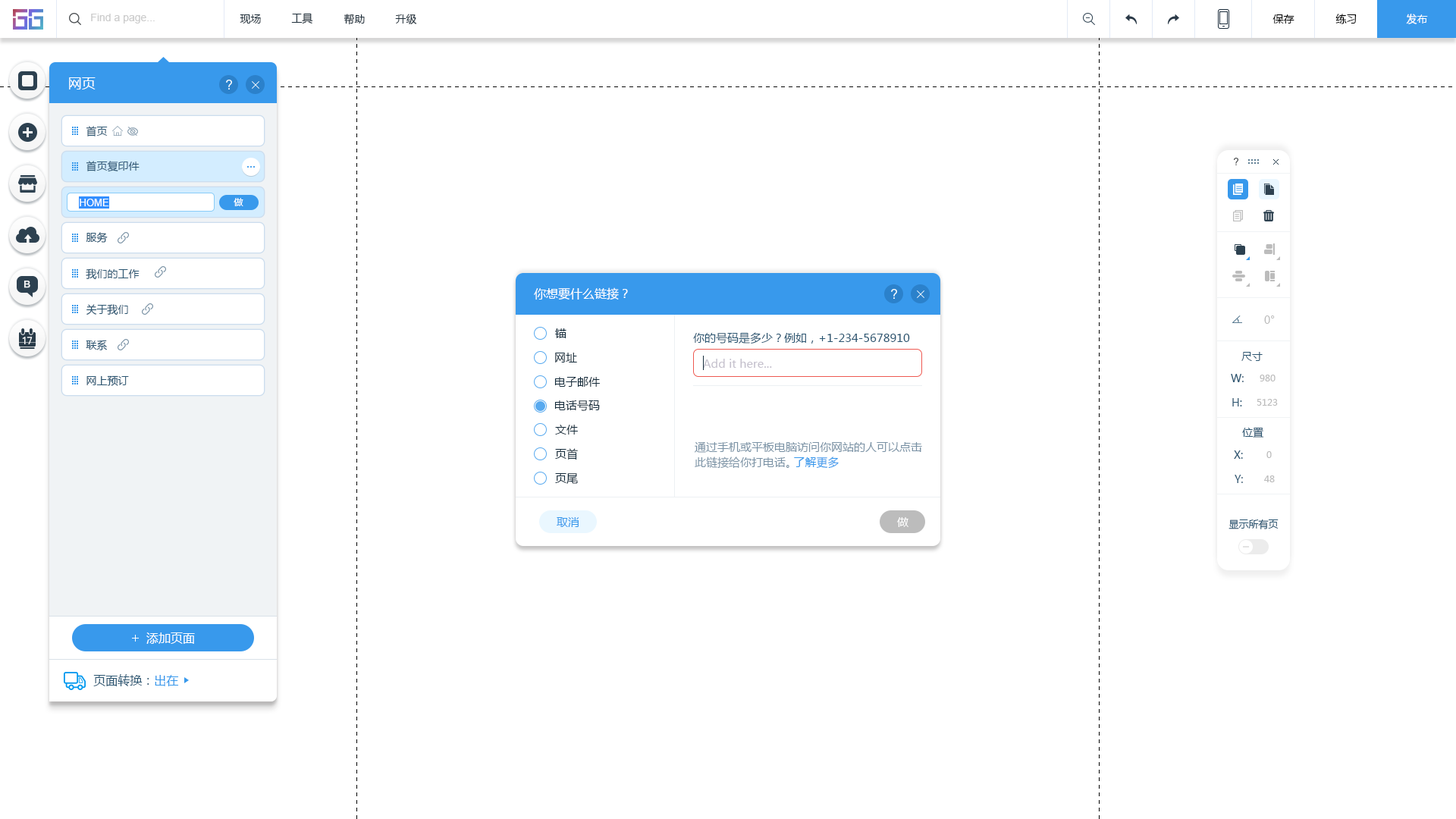
<style>
.page{position:relative;width:1456px;height:819px;background:#ffffff}
.page>*{position:absolute;margin:0}
.t1{font:10.6px "ArialMT";color:#cccccc}
.t2{font:10.6px "MicrosoftYaHei";color:#20303c}
.t3{font:10.6px "MicrosoftYaHei";color:#000000}
.t4{font:10.6px "MicrosoftYaHei";color:#ffffff}
.t5{font:13.6px "MicrosoftYaHei";color:#ffffff}
.t6{font:10.6px "MicrosoftYaHei";color:#2b5672}
.t7{font:9.1px "MicrosoftYaHei";color:#ffffff}
.t8{font:9.9px "ArialMT";color:#ffffff}
.t9{font:12.1px "MicrosoftYaHei";color:#ffffff}
.t10{font:10.6px "MicrosoftYaHei";color:#bcbcbc}
.t11{font:11.4px "MicrosoftYaHei";color:#162d3d}
.t12{font:11.4px "MicrosoftYaHei";color:#2b5672}
.t13{font:11.4px "MicrosoftYaHei";color:#c5c1cd}
.t14{font:9.1px "MicrosoftYaHei";color:#bcbcbc}
.t15{font:11.4px/15.2px "MicrosoftYaHei";color:#7a92a5}
.t16{font:11.4px/15.2px "MicrosoftYaHei";color:#3899ec}
.t17{font:11.4px "MicrosoftYaHei";color:#3899ec}
.t18{font:11.4px "MicrosoftYaHei";color:#ffffff}
.t19{font:9.9px "MicrosoftYaHei";color:#2b5672}
.t20{font:9.1px "MicrosoftYaHei";color:#2b5672}
.t21{font:9.1px "MicrosoftYaHei";color:#3899ec}
</style>
<div class="page">
<p class="t1" style="left:91px;top:14px;width:64px;height:10px">Find a page...</p>
<p class="t2" style="left:240px;top:14px;width:21px;height:10px">现场</p>
<p class="t2" style="left:291px;top:13px;width:22px;height:11px">工具</p>
<p class="t2" style="left:344px;top:14px;width:21px;height:11px">帮助</p>
<p class="t2" style="left:395px;top:14px;width:22px;height:10px">升级</p>
<p class="t3" style="left:1272px;top:14px;width:22px;height:10px">保存</p>
<p class="t3" style="left:1335px;top:14px;width:22px;height:10px">练习</p>
<p class="t4" style="left:1406px;top:14px;width:22px;height:10px">发布</p>
<p class="t5" style="left:69px;top:77px;width:27px;height:12px">网页</p>
<p class="t6" style="left:86px;top:126px;width:22px;height:10px">首页</p>
<p class="t6" style="left:86px;top:161px;width:54px;height:11px">首页复印件</p>
<p class="t7" style="left:234px;top:198px;width:9px;height:8px">做</p>
<p class="t8" style="left:80px;top:199px;width:29px;height:7px">HOME</p>
<p class="t6" style="left:86px;top:232px;width:22px;height:11px">服务</p>
<p class="t6" style="left:86px;top:268px;width:54px;height:12px">我们的工作</p>
<p class="t9" style="left:534px;top:287px;width:94px;height:13px">你想要什么链接？</p>
<p class="t6" style="left:86px;top:304px;width:42px;height:11px">关于我们</p>
<p class="t10" style="left:1264px;top:315px;width:11px;height:9px">0°</p>
<p class="t11" style="left:555px;top:328px;width:11px;height:10px">锚</p>
<p class="t6" style="left:86px;top:340px;width:21px;height:10px">联系</p>
<p class="t12" style="left:693px;top:332px;width:217px;height:12px">你的号码是多少？例如，+1-234-5678910</p>
<p class="t11" style="left:555px;top:353px;width:22px;height:9px">网址</p>
<p class="t6" style="left:1241px;top:352px;width:22px;height:9px">尺寸</p>
<p class="t13" style="left:703px;top:359px;width:69px;height:9px">Add it here...</p>
<p class="t6" style="left:86px;top:375px;width:43px;height:11px">网上预订</p>
<p class="t11" style="left:554px;top:377px;width:46px;height:10px">电子邮件</p>
<p class="t6" style="left:1231px;top:374px;width:13px;height:8px">W:</p>
<p class="t14" style="left:1260px;top:375px;width:15px;height:6px">980</p>
<p class="t11" style="left:554px;top:400px;width:46px;height:11px">电话号码</p>
<p class="t6" style="left:1232px;top:398px;width:10px;height:8px">H:</p>
<p class="t14" style="left:1257px;top:399px;width:21px;height:7px">5123</p>
<p class="t11" style="left:555px;top:425px;width:23px;height:10px">文件</p>
<p class="t6" style="left:1242px;top:427px;width:22px;height:11px">位置</p>
<p class="t11" style="left:555px;top:448px;width:23px;height:12px">页首</p>
<p class="t15" style="left:695px;top:441px;width:227px;height:28px">通过手机或平板电脑访问你网站的人可以点击<br>此链接给你打电话。  <span class="t16">了解更多</span></p>
<p class="t6" style="left:1234px;top:450px;width:9px;height:9px">X:</p>
<p class="t14" style="left:1266px;top:451px;width:6px;height:7px">0</p>
<p class="t11" style="left:555px;top:473px;width:23px;height:11px">页尾</p>
<p class="t6" style="left:1235px;top:475px;width:8px;height:8px">Y:</p>
<p class="t14" style="left:1264px;top:475px;width:11px;height:7px">48</p>
<p class="t17" style="left:557px;top:517px;width:22px;height:10px">取消</p>
<p class="t18" style="left:897px;top:517px;width:11px;height:10px">做</p>
<p class="t19" style="left:1228px;top:519px;width:51px;height:10px">显示所有页</p>
<p class="t9" style="left:146px;top:632px;width:49px;height:12px">添加页面</p>
<p class="t20" style="left:93px;top:674px;width:86px;height:12px">页面转换：<span class="t21">出在</span></p>
</div>
